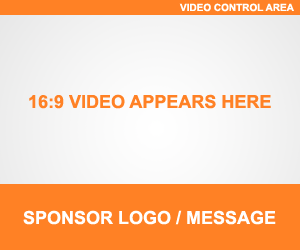
<style>
.page{position:relative;width:300px;height:250px;background:#ff8125}
.page>*{position:absolute;margin:0}
.t1{font:10px "Arial-BoldMT";color:#ffffff;text-transform:uppercase}
.t2{font:18px "Arial-BoldMT";color:#ff8125;text-transform:uppercase}
.t3{font:18px "Arial-BoldMT";color:#ffffff;text-transform:uppercase}
</style>
<div class="page">
<p class="t1" style="left:179px;top:3px;width:115px;height:9px">VIDEO CONTROL AREA</p>
<p class="t2" style="left:29px;top:94px;width:242px;height:15px">16:9 VIDEO APPEARS HERE</p>
<p class="t3" style="left:23px;top:210px;width:253px;height:15px">SPONSOR LOGO / MESSAGE</p>
</div>
